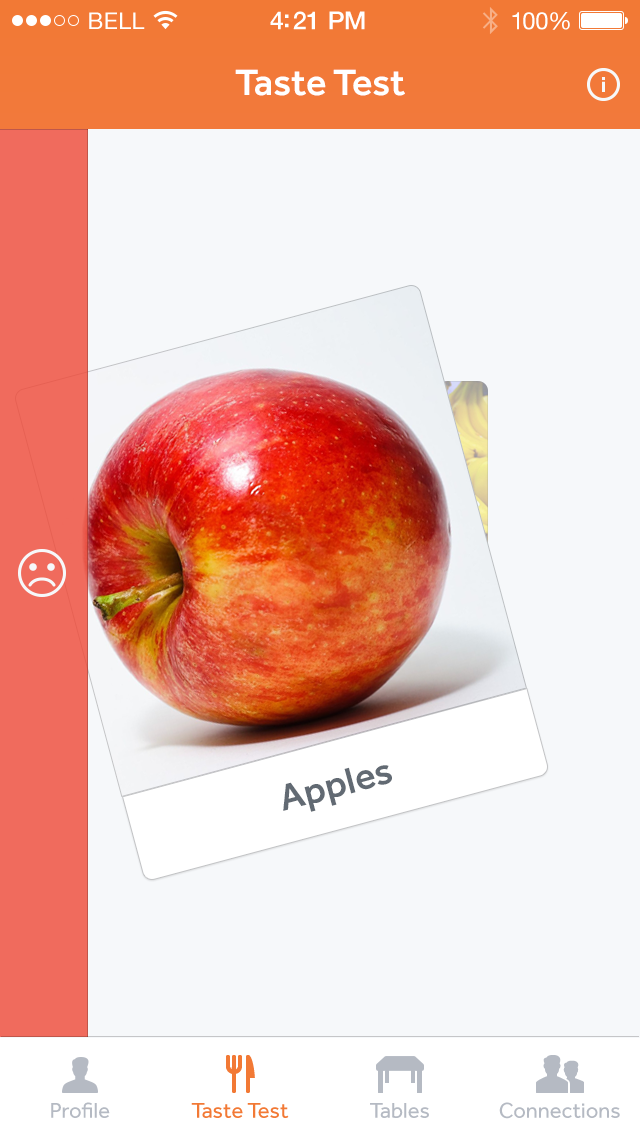
<style>
.page{position:relative;width:640px;height:1136px;background:#f6f8fa}
.page>*{position:absolute;margin:0}
.t1{font:23px "HelveticaNeue";letter-spacing:0.02em;color:#ffffff}
.t2{font:25px "HelveticaNeue-Medium";letter-spacing:-0.02em;color:#ffffff}
.t3{font:24px "HelveticaNeue";letter-spacing:-0.02em;color:#ffffff}
.t4{font:38px "Effra-Medium";color:#ffffff}
.t5{font:38px "Effra-Medium";color:#626a73}
.t6{font:22px "Effra-Regular";color:#b5bac3}
.t7{font:22px "Effra-Regular";color:#f27935}
</style>
<div class="page">
<p class="t1" style="left:89px;top:12px;width:56px;height:17px">BELL</p>
<p class="t2" style="left:270px;top:11px;width:95px;height:19px">4:21 PM</p>
<p class="t3" style="left:512px;top:12px;width:58px;height:18px">100%</p>
<p class="t4" style="left:235px;top:69px;width:170px;height:27px">Taste Test</p>
<p class="t5" style="left:283px;top:765px;width:109px;height:47px;rotate:-15deg">Apples</p>
<p class="t6" style="left:51px;top:1102px;width:59px;height:16px">Profile</p>
<p class="t7" style="left:191px;top:1103px;width:98px;height:15px">Taste Test</p>
<p class="t6" style="left:370px;top:1103px;width:59px;height:15px">Tables</p>
<p class="t6" style="left:499px;top:1102px;width:121px;height:17px">Connections</p>
</div>
